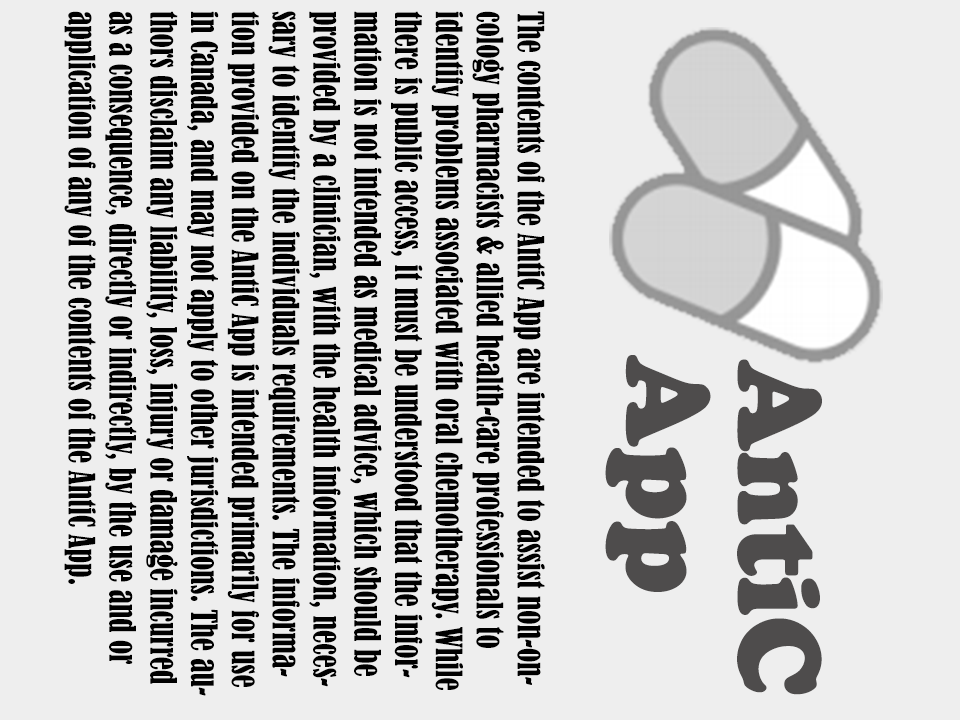
<style>
.page{position:relative;width:960px;height:720px;background:#eeeeee}
.page>*{position:absolute;margin:0}
.t1{font:34px "BernardMT-Condensed";color:#000000;scale:0.87 1}
.t2{font:121.7px "CooperBlack";color:#4e4c4c;scale:0.91 1}
</style>
<div class="page">
<p class="t1" style="left:64px;top:11px;width:481px;height:685px;rotate:90deg">The contents of the AntiC App are intended to assist non-oncology pharmacists &amp; allied health-care professionals to identify problems associated with oral chemotherapy. While there is public access, it must be understood that the information is not intended as medical advice, which should be provided by a clinician, with the health information, necessary to identify the individuals requirements. The information provided on the AntiC App is intended primarily for use in Canada, and may not apply to other jurisdictions. The authors disclaim any liability, loss, injury or damage incurred as a consequence, directly or indirectly, by the use and or application of any of the contents of the AntiC App.</p>
<p class="t2" style="left:605px;top:355px;width:106px;height:237px;rotate:90deg">App</p>
<p class="t2" style="left:737px;top:359px;width:85px;height:336px;rotate:90deg">AntiC</p>
</div>
